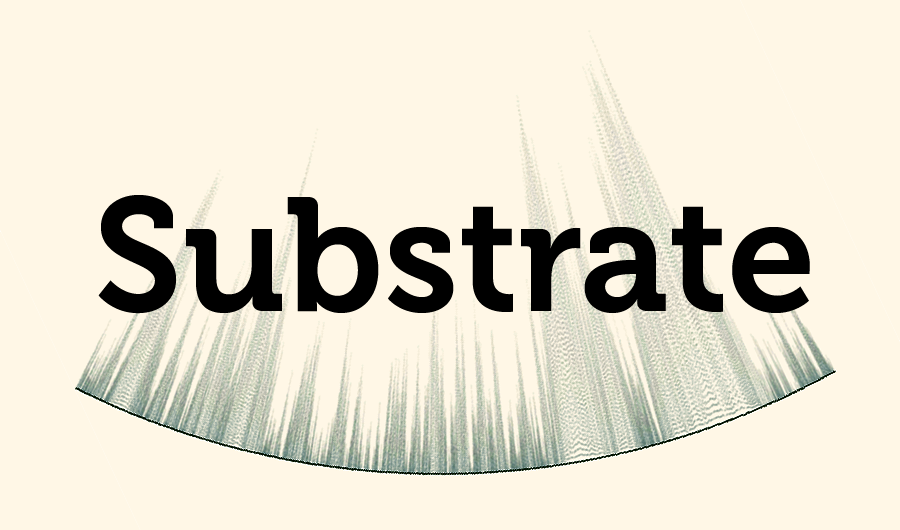
<style>
.page{position:relative;width:900px;height:530px;background:#fff7e6}
.page>*{position:absolute;margin:0}
.t1{font:160px "Museo-700";color:#000000}
</style>
<div class="page">
<p class="t1" style="left:98px;top:195px;width:712px;height:119px">Substrate</p>
</div>
